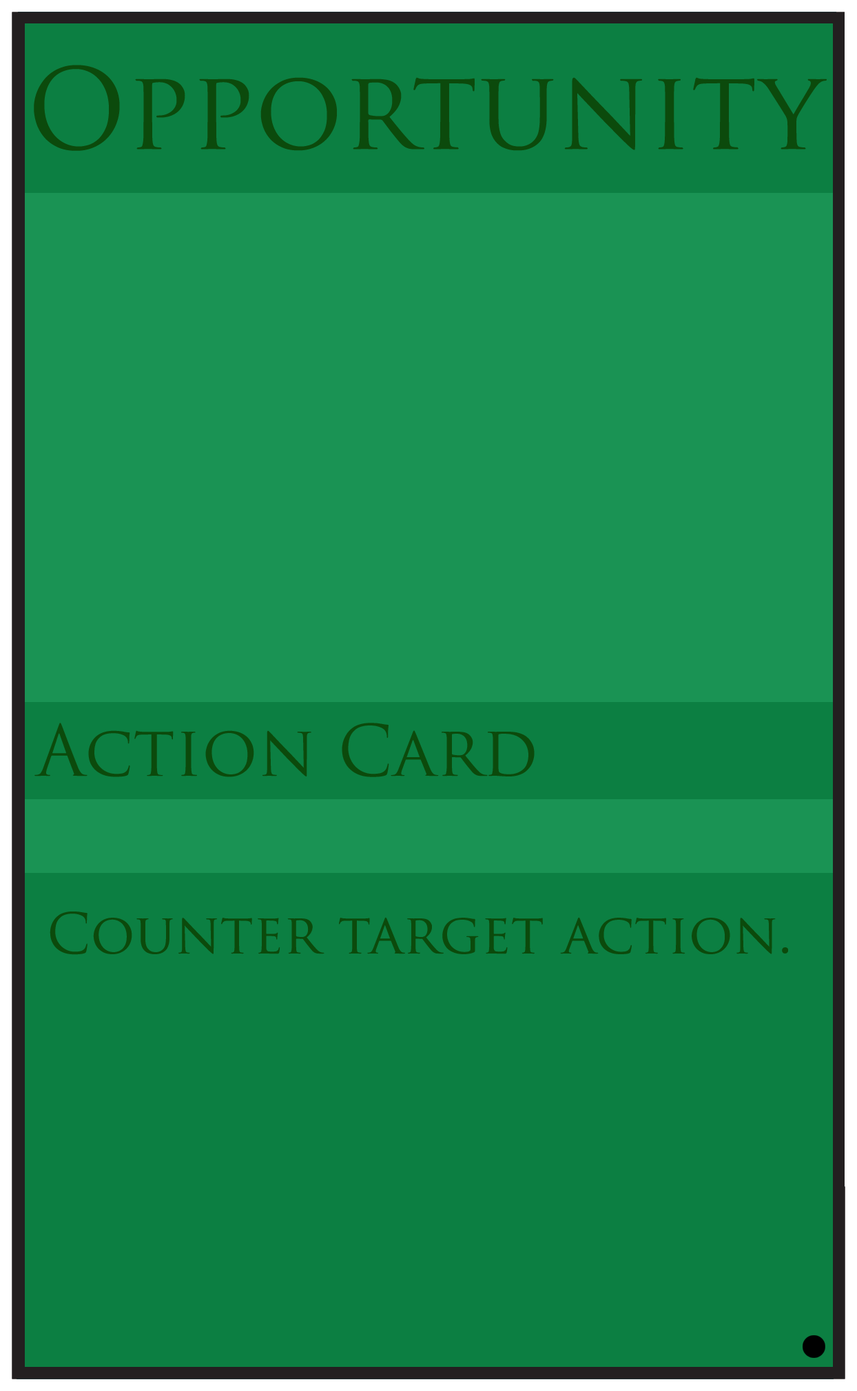
<style>
.page{position:relative;width:857px;height:1391px;background:#0c7f42}
.page>*{position:absolute;margin:0}
.t1{font:109.1px "TrajanPro-Regular";color:#0c4a0c}
.t2{font:68.9px "TrajanPro-Regular";color:#0c4a0c}
.t3{font:54.5px "TrajanPro-Regular";color:#0c4a0c}
</style>
<div class="page">
<p class="t1" style="left:34px;top:65px;width:793px;height:86px">Opportunity</p>
<p class="t2" style="left:34px;top:723px;width:501px;height:54px">Action Card</p>
<p class="t3" style="left:50px;top:912px;width:738px;height:43px">Counter target action.</p>
</div>
